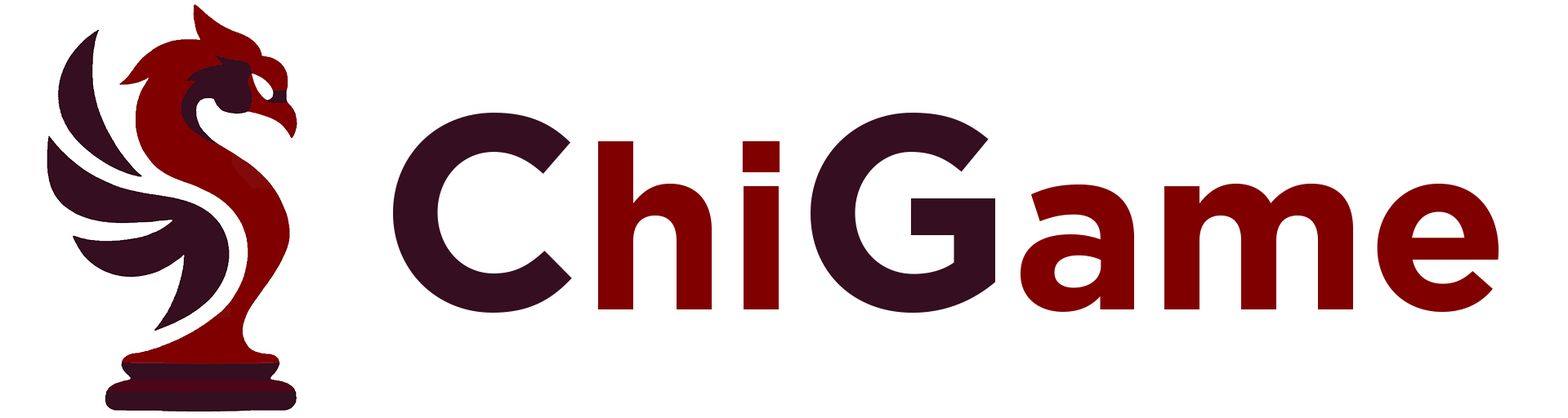
<style>
.page{position:relative;width:1568px;height:418px;background:#ffffff}
.page>*{position:absolute;margin:0}
.t1{font:230.5px "Gotham-Bold";color:#800000}
.t2{font:276.6px "Gotham-Bold";color:#350e20}
</style>
<div class="page">
<p class="t1" style="left:393px;top:113px;width:1106px;height:201px"><span class="t2">C</span>hi<span class="t2">G</span>ame</p>
</div>
